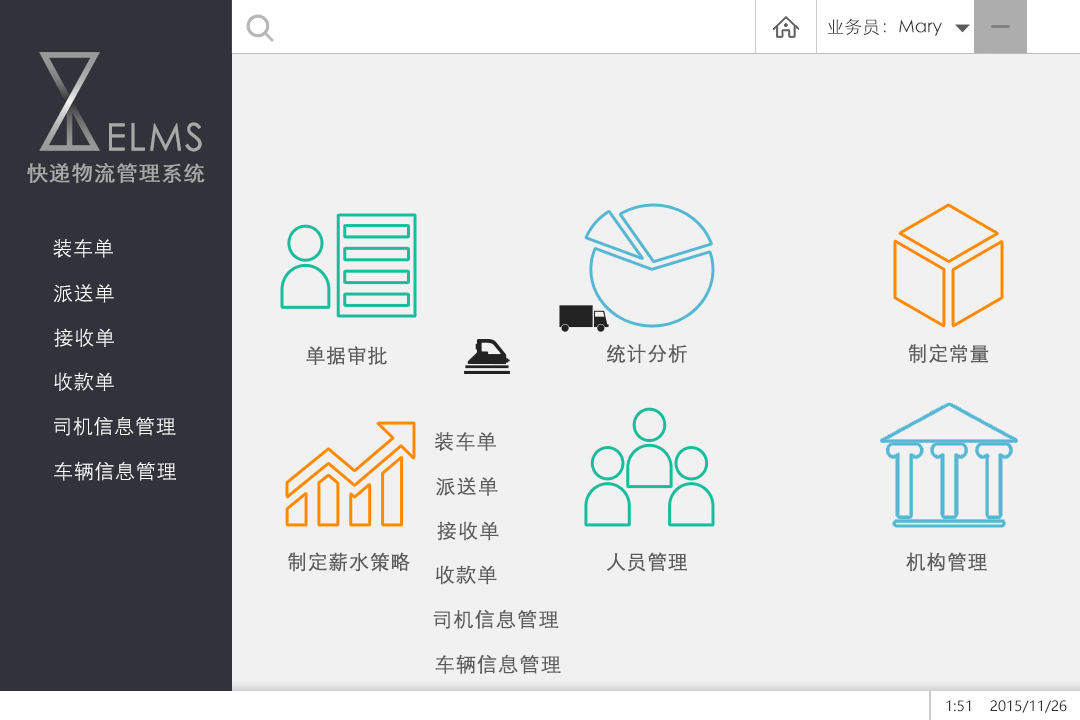
<style>
.page{position:relative;width:1080px;height:720px;background:#f1f1f1}
.page>*{position:absolute;margin:0}
.t1{font:17.7px "STXihei";color:#32323a}
.t2{font:20px "STXihei";letter-spacing:0.035em;color:#ffffff}
.t3{font:20px "STXihei";letter-spacing:0.035em;color:#5c5c5c;font-weight:bold}
.t4{font:14px "MicrosoftYaHei";color:#32323a}
</style>
<div class="page">
<p class="t1" style="left:827px;top:18px;width:115px;height:18px">业务员：Mary</p>
<p class="t2" style="left:53px;top:239px;width:60px;height:19px">装车单</p>
<p class="t2" style="left:54px;top:284px;width:60px;height:19px">派送单</p>
<p class="t2" style="left:54px;top:328px;width:60px;height:19px">接收单</p>
<p class="t2" style="left:54px;top:372px;width:60px;height:19px">收款单</p>
<p class="t2" style="left:54px;top:416px;width:122px;height:20px">司机信息管理</p>
<p class="t3" style="left:435px;top:432px;width:61px;height:19px">装车单</p>
<p class="t2" style="left:54px;top:461px;width:122px;height:20px">车辆信息管理</p>
<p class="t3" style="left:436px;top:477px;width:62px;height:19px">派送单</p>
<p class="t3" style="left:437px;top:521px;width:62px;height:20px">接收单</p>
<p class="t3" style="left:436px;top:565px;width:61px;height:20px">收款单</p>
<p class="t3" style="left:433px;top:609px;width:126px;height:20px">司机信息管理</p>
<p class="t3" style="left:435px;top:654px;width:126px;height:20px">车辆信息管理</p>
<p class="t4" style="left:946px;top:700px;width:121px;height:13px">1:51    2015/11/26</p>
</div>
